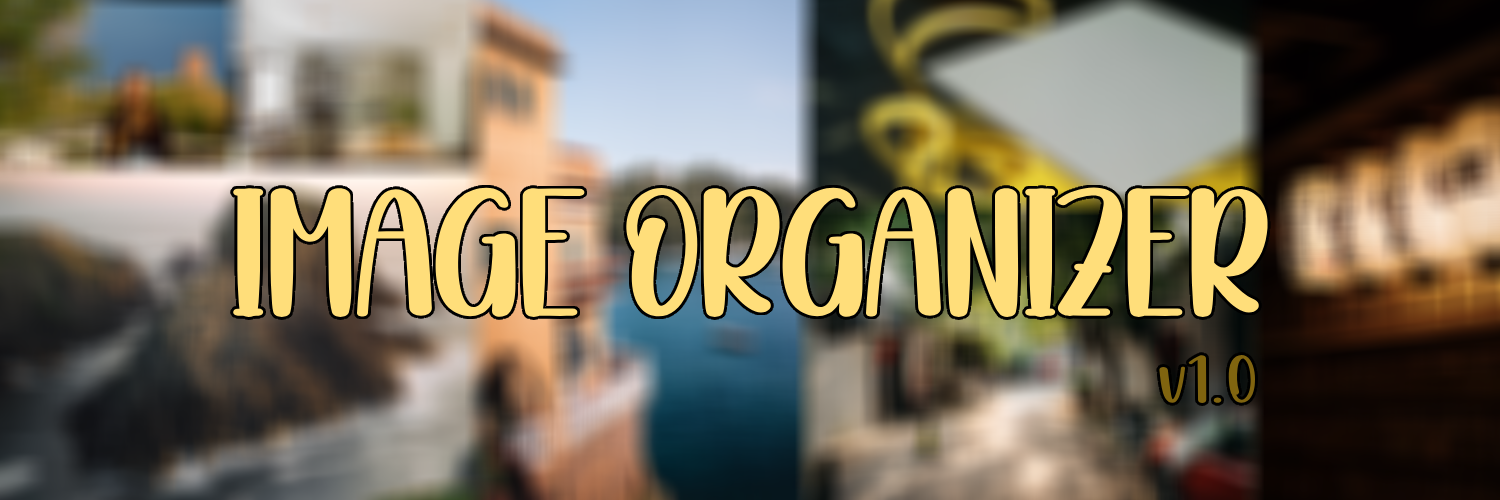
<style>
.page{position:relative;width:1500px;height:500px}
.page>*{position:absolute;margin:0}
.t1{font:200px "ImageRegular";color:#ffde7a}
.t2{font:75px "ImageRegular";color:#80640f}
</style>
<div class="page">
<p class="t1" style="left:231px;top:179px;width:1038px;height:141px">IMAGE ORGANIZER</p>
<p class="t2" style="left:1158px;top:352px;width:98px;height:52px">v1.0</p>
</div>
